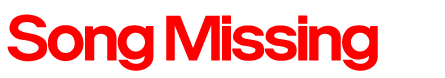
<style>
.page{position:relative;width:445px;height:78px;background:#ffffff}
.page>*{position:absolute;margin:0}
.t1{font:72px "Pentatonic";letter-spacing:-0.075em;color:#fd0000;font-weight:bold}
</style>
<div class="page">
<p class="t1" style="left:7px;top:14px;width:371px;height:57px">Song Missing</p>
</div>
